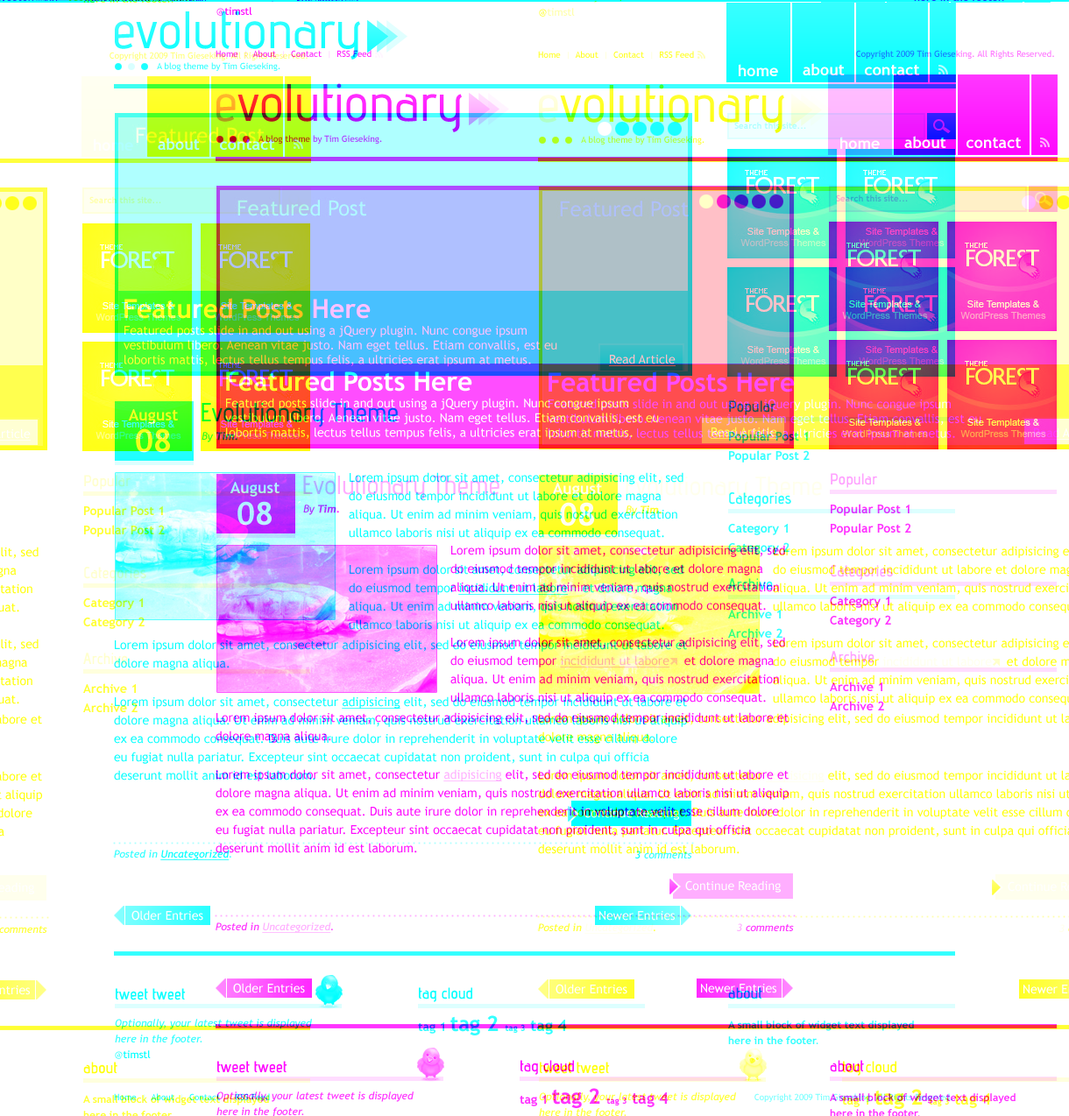
<style>
.page{position:relative;width:1069px;height:1116px;background:#ffffff}
.page>*{position:absolute;margin:0}
.t1{font:52.6px "adventpro-Bd1";color:#27ffff}
.t2{font:15.8px "TrebuchetMS-Bold"}
.t3{font:42px "Helvetica";letter-spacing:-0.05em}
.t4{font:8.8px "TrebuchetMS-Bold"}
.t5{font:26.3px "TrebuchetMS-Bold"}
.t6{font:12.3px "TrebuchetMS"}
.t7{font:12.3px "TrebuchetMS";text-decoration:underline}
.t8{font:26.3px "adventpro-Bd1"}
.t9{font:15.8px "adventpro-Bd2"}
.t10{font:15.8px/31.5px "TrebuchetMS-Bold"}
.t11{font:31.5px/31.5px "TrebuchetMS-Bold"}
.t12{font:10.5px "TrebuchetMS-Italic";font-weight:bold}
.t13{font:10.5px "TrebuchetMS-Italic"}
.t14{font:10.5px "TrebuchetMS-Bold";font-weight:bold}
.t15{font:12.3px "TrebuchetMS-Bold"}
.t16{font:12.3px/18.4px "TrebuchetMS"}
.t17{font:12.3px/18.4px "TrebuchetMS";text-decoration:underline}
.t18{font:21px "TrebuchetMS-Bold"}
.t19{font:10.5px/15.8px "TrebuchetMS-Italic"}
.t20{font:10.5px/15.8px "TrebuchetMS"}
.t21{font:10.5px/15.8px "TrebuchetMS-Bold"}
</style>
<div class="page">
<p class="t1" style="left:115px;top:9px;width:245px;height:49px">evolutionary</p>
<p class="t2" style="left:738px;top:62px;width:40px;height:12px"><span class="t3">  </span>home</p>
<p class="t2" style="left:802px;top:61px;width:42px;height:13px"><span class="t3">  </span>about</p>
<p class="t2" style="left:865px;top:62px;width:54px;height:12px"><span class="t3">  </span>contact</p>
<p class="t4" style="left:734px;top:120px;width:72px;height:7px">Search this site...</p>
<p class="t5" style="left:124px;top:296px;width:247px;height:21px">Featured Posts Here</p>
<p class="t6" style="left:124px;top:323px;width:433px;height:42px">Featured posts slide in and out using a jQuery plugin. Nunc congue ipsum <br>vestibulum libero. Aenean vitae justo. Nam eget tellus. Etiam convallis, est eu <br>lobortis mattis, lectus tellus tempus felis, a ultricies erat ipsum at metus.</p>
<p class="t7" style="left:609px;top:352px;width:66px;height:12px">Read Article</p>
<p class="t8" style="left:201px;top:401px;width:197px;height:25px">Evolutionary Theme</p>
<p class="t9" style="left:729px;top:399px;width:46px;height:14px">Popular</p>
<p class="t10" style="left:128px;top:407px;width:50px;height:44px;text-align:center">August<br><span class="t11">08</span></p>
<p class="t12" style="left:201px;top:430px;width:36px;height:11px"><span class="t13">By </span>Tim<span class="t14">.</span></p>
<p class="t15" style="left:729px;top:429px;width:79px;height:12px">Popular Post 1</p>
<p class="t16" style="left:349px;top:470px;width:334px;height:160px">Lorem ipsum dolor sit amet, consectetur adipisicing elit, sed <br>do eiusmod tempor incididunt ut labore et dolore magna <br>aliqua. Ut enim ad minim veniam, quis nostrud exercitation <br>ullamco laboris nisi ut aliquip ex ea commodo consequat.<br><br>Lorem ipsum dolor sit amet, consectetur adipisicing elit, sed <br>do eiusmod tempor <span class="t17">incididunt ut labore</span>    et dolore magna <br>aliqua. Ut enim ad minim veniam, quis nostrud exercitation <br>ullamco laboris nisi ut aliquip ex ea commodo consequat.</p>
<p class="t9" style="left:728px;top:576px;width:45px;height:13px">Archive</p>
<p class="t15" style="left:728px;top:607px;width:52px;height:10px">Archive 1</p>
<p class="t15" style="left:728px;top:626px;width:54px;height:10px">Archive 2</p>
<p class="t16" style="left:114px;top:638px;width:573px;height:30px">Lorem ipsum dolor sit amet, consectetur adipisicing elit, sed do eiusmod tempor incididunt ut labore et <br>dolore magna aliqua.</p>
<p class="t16" style="left:114px;top:695px;width:573px;height:84px">Lorem ipsum dolor sit amet, consectetur <span class="t17">adipisicing </span>elit, sed do eiusmod tempor incididunt ut labore et <br>dolore magna aliqua. Ut enim ad minim veniam, quis nostrud exercitation ullamco laboris nisi ut aliquip <br>ex ea commodo consequat. Duis aute irure dolor in reprehenderit in voluptate velit esse cillum dolore <br>eu fugiat nulla pariatur. Excepteur sint occaecat cupidatat non proident, sunt in culpa qui officia <br>deserunt mollit anim id est laborum.</p>
<p class="t9" style="left:116px;top:986px;width:70px;height:13px">tweet tweet</p>
<p class="t9" style="left:419px;top:985px;width:53px;height:15px">tag cloud</p>
<p class="t9" style="left:728px;top:985px;width:34px;height:13px">about</p>
<p class="t15" style="left:418px;top:1013px;width:149px;height:21px">tag 1 <span class="t18">tag 2 </span><span class="t4">tag 3</span><span class="t2"> tag 4</span></p>
<p class="t19" style="left:115px;top:1017px;width:197px;height:40px">Optionally, your latest tweet is displayed <br>here in the footer.<br><span class="t20">@</span><span class="t20">timstl</span></p>
<p class="t21" style="left:728px;top:1019px;width:186px;height:23px">A small block of widget text displayed<br>here in the footer.</p>
</div>
